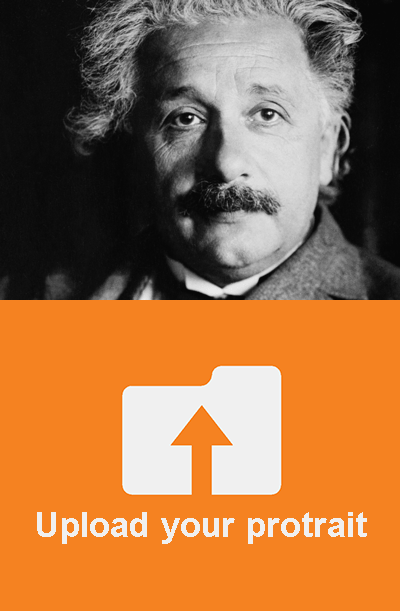
<style>
.page{position:relative;width:400px;height:611px;background:#f58221}
.page>*{position:absolute;margin:0}
.t1{font:34.7px "Arial-BoldMT";color:#f0f0f0}
</style>
<div class="page">
<p class="t1" style="left:37px;top:512px;width:330px;height:32px">Upload your protrait</p>
</div>
